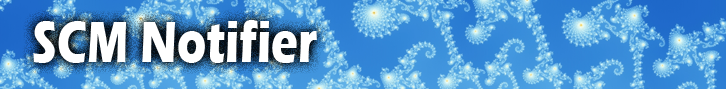
<style>
.page{position:relative;width:726px;height:89px}
.page>*{position:absolute;margin:0}
.t1{font:60px "ErasITC-Bold";color:#ffffff;scale:0.75 1}
</style>
<div class="page">
<p class="t1" style="left:33px;top:20px;width:284px;height:43px">SCM Notifier</p>
</div>
